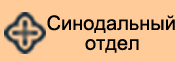
<style>
.page{position:relative;width:176px;height:62px;background:#ffcc99}
.page>*{position:absolute;margin:0}
.t1{font:20px "ArialMT";color:#000000}
</style>
<div class="page">
<p class="t1" style="left:47px;top:15px;width:128px;height:18px">Синодальный</p>
<p class="t1" style="left:85px;top:39px;width:54px;height:14px">отдел</p>
</div>
